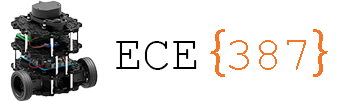
<style>
.page{position:relative;width:360px;height:101px;background:#ffffff}
.page>*{position:absolute;margin:0}
.t1{font:48px "CourierNewPSMT";color:#f37726}
.t2{font:60px "MyriadPro-Regular";color:#f37726}
.t3{font:48px "CourierNewPSMT";color:#000000}
</style>
<div class="page">
<p class="t1" style="left:210px;top:29px;width:118px;height:48px"><span class="t2">{</span>387<span class="t2">}</span></p>
<p class="t3" style="left:116px;top:41px;width:81px;height:29px">ECE</p>
</div>
